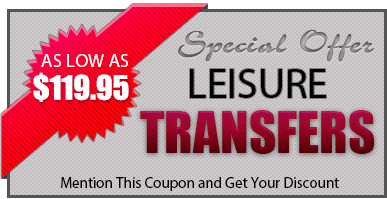
<style>
.page{position:relative;width:387px;height:199px;background:#cecbcb}
.page>*{position:absolute;margin:0}
.t1{font:30px "Corrida-Bold"}
.t2{font:19px "MyriadPro-Regular";color:#ffffff}
.t3{font:31px "Impact";color:#ffffff}
.t4{font:41.7px "MyriadPro-Regular";color:#000000;text-transform:uppercase}
.t5{font:53px "Impact";text-transform:uppercase}
.t6{font:15px "MyriadPro-Regular";color:#000000}
</style>
<div class="page">
<p class="t1" style="left:178px;top:29px;width:197px;height:33px">Special Offer</p>
<p class="t2" style="left:41px;top:54px;width:87px;height:13px">AS LOW AS</p>
<p class="t3" style="left:33px;top:72px;width:96px;height:30px">$119.95</p>
<p class="t4" style="left:190px;top:69px;width:136px;height:29px">LEISURE</p>
<p class="t5" style="left:140px;top:110px;width:235px;height:44px">TRANSFERS</p>
<p class="t6" style="left:61px;top:177px;width:278px;height:14px">Mention This Coupon and Get Your Discount</p>
</div>
